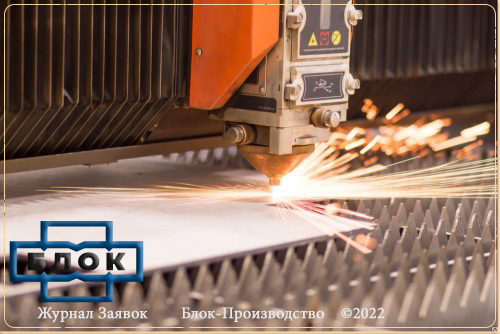
<style>
.page{position:relative;width:500px;height:334px}
.page>*{position:absolute;margin:0}
.t1{font:16px "MinionPro-Regular";color:#e8e7e7;font-weight:bold}
</style>
<div class="page">
<p class="t1" style="left:37px;top:307px;width:348px;height:16px">Журнал Заявок  Блок-Производство    ©2022</p>
</div>
